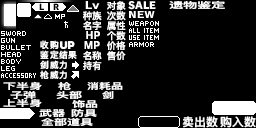
<style>
.page{position:relative;width:256px;height:128px;background:#000000}
.page>*{position:absolute;margin:0}
.t1{font:9.3px/10px "DFKingGothicSC14-Semibold";letter-spacing:0.005em;color:#ffffff}
.t2{font:8.4px "DFKingGothicSC14-Semibold";letter-spacing:-0.015em;color:#ffffff;scale:1.71 1}
.t3{font:8.7px/10px "DFKingGothicSC14-Semibold";letter-spacing:0.045em;color:#ffffff}
.t4{font:8.4px/8.7px "DFKingGothicSC14-Semibold";letter-spacing:0.005em;color:#ffffff;scale:1.56 1}
.t5{font:8.4px "DFKingGothicSC14-Semibold";letter-spacing:0.005em;color:#ffffff;scale:1.56 1}
.t6{font:8.4px "DFKingGothicSC14-Semibold";letter-spacing:0.005em;color:#ffffff;scale:1.43 1}
.t7{font:11.4px "DFKingGothicSC14-Semibold";letter-spacing:0.005em;color:#ffffff;scale:1.05 1}
</style>
<div class="page">
<p class="t1" style="left:107px;top:1px;width:19px;height:60px;text-align:center">对象<br>次数<br>属性<br>个数<br>价格<br>售价</p>
<p class="t2" style="left:169px;top:0px;width:56px;height:9px">遗物鉴定</p>
<p class="t1" style="left:83px;top:11px;width:19px;height:19px;text-align:center">种族<br>名字</p>
<p class="t3" style="left:40px;top:40px;width:37px;height:39px">收购<br>鉴定结果<br>剑威力<br>枪威力</p>
<p class="t1" style="left:83px;top:51px;width:19px;height:20px;text-align:center">名称<br>持有</p>
<p class="t4" style="left:3px;top:81px;width:39px;height:26px;text-align:center">下半身<br>子弹<br>上半身</p>
<p class="t5" style="left:58px;top:82px;width:13px;height:8px">枪</p>
<p class="t6" style="left:87px;top:82px;width:36px;height:8px">消耗品</p>
<p class="t5" style="left:56px;top:91px;width:26px;height:8px">头部</p>
<p class="t5" style="left:72px;top:100px;width:26px;height:8px">饰品</p>
<p class="t6" style="left:102px;top:91px;width:12px;height:8px">剑</p>
<p class="t5" style="left:39px;top:109px;width:26px;height:8px">武器</p>
<p class="t5" style="left:71px;top:109px;width:26px;height:8px">防具</p>
<p class="t5" style="left:41px;top:118px;width:52px;height:8px">全部道具</p>
<p class="t7" style="left:182px;top:116px;width:36px;height:12px">卖出数</p>
<p class="t7" style="left:220px;top:116px;width:36px;height:12px">购入数</p>
</div>
